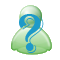
<style>
.page{position:relative;width:60px;height:60px;background:#ffffff}
.page>*{position:absolute;margin:0}
.t1{font:60px "Algerian";color:#1e9ac8}
</style>
<div class="page">
<p class="t1" style="left:19px;top:14px;width:25px;height:39px">?</p>
</div>
